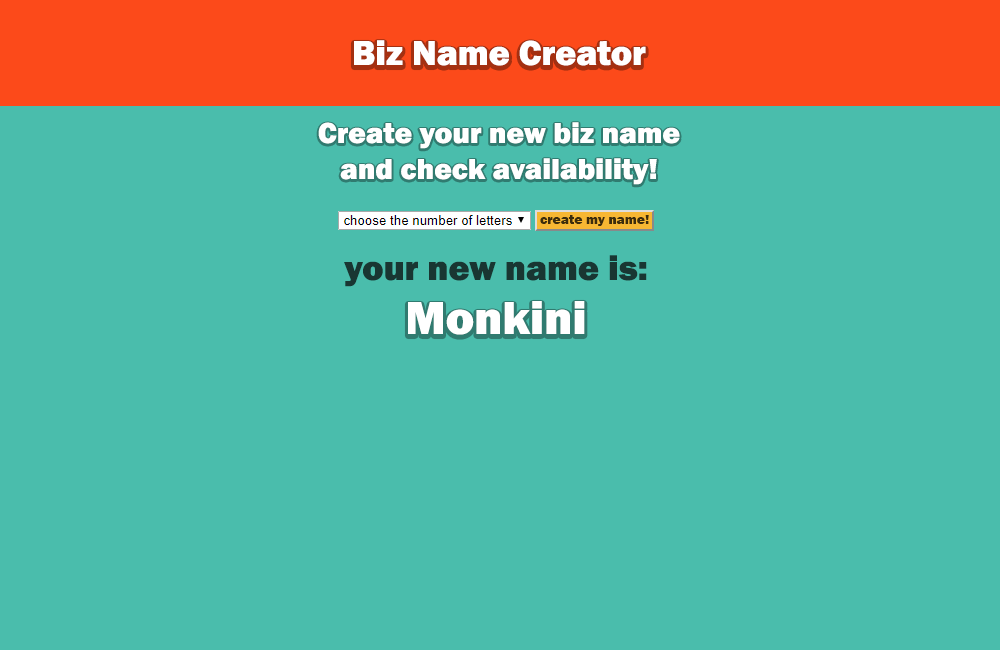
<style>
.page{position:relative;width:1000px;height:650px;background:#4abdac}
.page>*{position:absolute;margin:0}
.t1{font:36px "FranklinGothic-Heavy";color:#ffffff}
.t2{font:30px "FranklinGothic-Heavy";color:#ffffff}
.t3{font:14px "FranklinGothic-Heavy";color:#3c2c0c}
.t4{font:36px "FranklinGothic-Heavy";color:#193632}
.t5{font:48px "FranklinGothic-Heavy";color:#ffffff}
</style>
<div class="page">
<p class="t1" style="left:354px;top:40px;width:292px;height:26px">Biz Name Creator</p>
<p class="t2" style="left:318px;top:122px;width:362px;height:63px;text-align:center">Create your new biz name<br>and check availability!</p>
<p class="t3" style="left:540px;top:215px;width:109px;height:11px">create my name!</p>
<p class="t4" style="left:344px;top:255px;width:303px;height:32px">your new name is:</p>
<p class="t5" style="left:408px;top:301px;width:177px;height:34px">Monkini</p>
</div>
